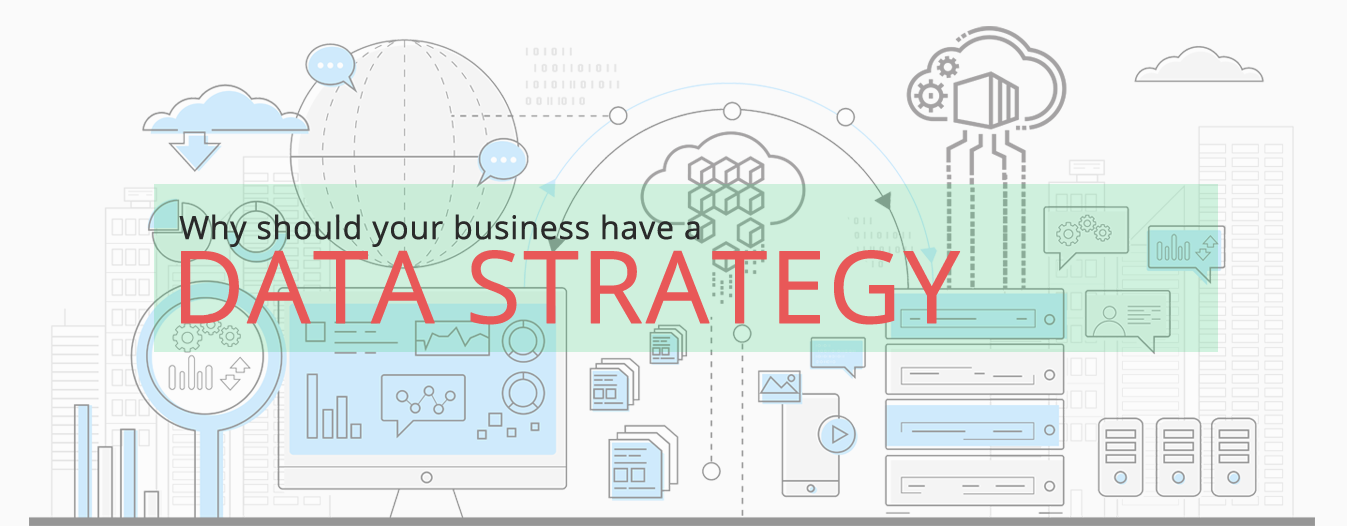
<style>
.page{position:relative;width:1347px;height:526px;background:#fafafa}
.page>*{position:absolute;margin:0}
.t1{font:32px "OpenSans-Regular";color:#2a2a2a;font-weight:bold}
.t2{font:100px "OpenSans-Regular";color:#e85858;font-weight:bold}
</style>
<div class="page">
<p class="t1" style="left:179px;top:214px;width:521px;height:33px">Why should your business have a</p>
<p class="t2" style="left:181px;top:250px;width:780px;height:75px">DATA STRATEGY</p>
</div>
